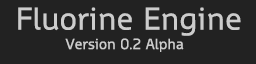
<style>
.page{position:relative;width:256px;height:64px;background:#222222}
.page>*{position:absolute;margin:0}
.t1{font:30px "WascoSans";color:#cccccc}
.t2{font:14px "WascoSans";color:#cccccc}
</style>
<div class="page">
<p class="t1" style="left:18px;top:7px;width:223px;height:29px">Fluorine Engine</p>
<p class="t2" style="left:65px;top:38px;width:119px;height:14px">Version 0.2 Alpha</p>
</div>
